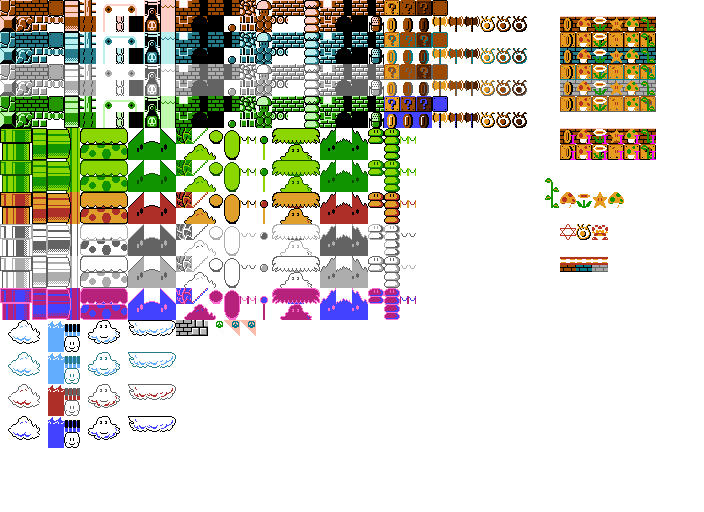
<style>
.page{position:relative;width:704px;height:512px;background:#ffffff}
.page>*{position:absolute;margin:0}
.t1{font:14px "Modern-Regular";color:#fc00ff}
</style>
<div class="page">
<p class="t1" style="left:570px;top:135px;width:6px;height:9px">I</p>
<p class="t1" style="left:586px;top:135px;width:6px;height:9px">I</p>
<p class="t1" style="left:602px;top:135px;width:6px;height:9px">I</p>
<p class="t1" style="left:618px;top:135px;width:6px;height:9px">I</p>
<p class="t1" style="left:634px;top:135px;width:6px;height:9px">I</p>
<p class="t1" style="left:650px;top:135px;width:6px;height:9px">I</p>
<p class="t1" style="left:570px;top:151px;width:6px;height:9px">I</p>
<p class="t1" style="left:586px;top:151px;width:6px;height:9px">I</p>
<p class="t1" style="left:602px;top:151px;width:6px;height:9px">I</p>
<p class="t1" style="left:618px;top:151px;width:6px;height:9px">I</p>
<p class="t1" style="left:634px;top:151px;width:6px;height:9px">I</p>
<p class="t1" style="left:650px;top:151px;width:6px;height:9px">I</p>
</div>
